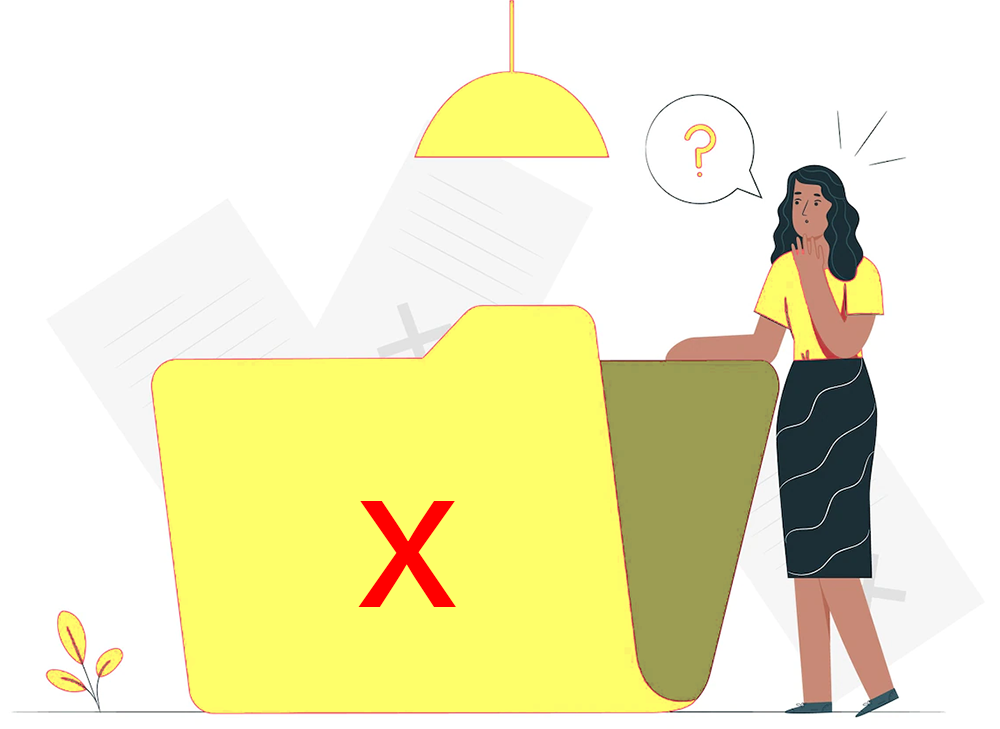
<style>
.page{position:relative;width:1000px;height:729px;background:#ffffff}
.page>*{position:absolute;margin:0}
.t1{font:219.8px "MyriadPro-Regular";color:#ff0000}
</style>
<div class="page">
<p class="t1" style="left:358px;top:501px;width:98px;height:106px">x</p>
</div>
